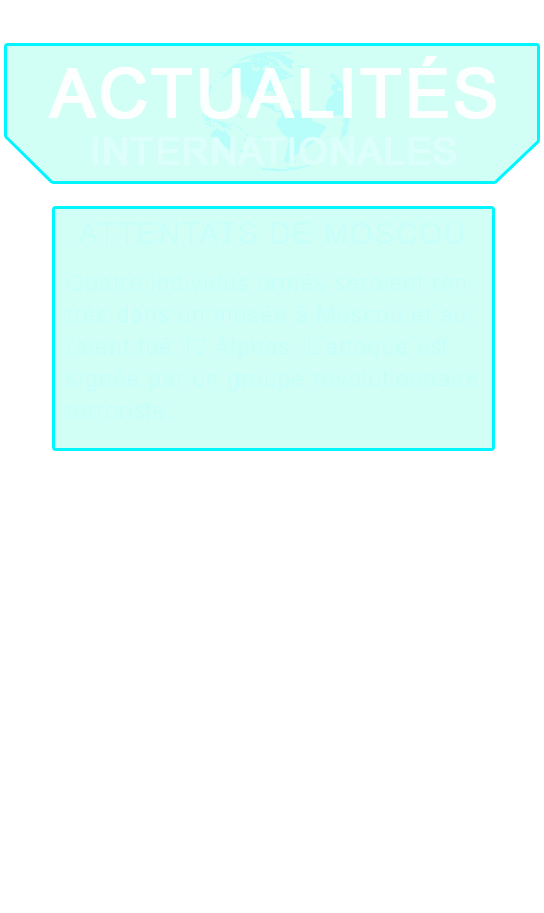
<style>
.page{position:relative;width:544px;height:913px;background:#ffffff}
.page>*{position:absolute;margin:0}
.t1{font:68px "ArialMT";letter-spacing:0.02em;color:#ffffff;font-weight:bold}
.t2{font:37px "ArialMT";letter-spacing:0.02em;color:#ddfffb;font-weight:bold}
.t3{font:30px "ArialMT";letter-spacing:0.02em;color:#c8fff9;font-weight:bold}
.t4{font:23px/32px "ArialMT";letter-spacing:0.02em;color:#c8fff9;font-weight:bold}
</style>
<div class="page">
<p class="t1" style="left:48px;top:56px;width:448px;height:63px;opacity:0.9">ACTUALITÉS</p>
<p class="t2" style="left:93px;top:137px;width:363px;height:28px">INTERNATIONALES</p>
<p class="t3" style="left:77px;top:222px;width:387px;height:23px">ATTENTATS DE MOSCOU</p>
<p class="t4" style="left:66px;top:274px;width:413px;height:146px">Quatre individus armés seraient rentrés dans un musée à Moscou et auraient tué 12 Alphas. L’attaque est signée par un groupe révolutionnaire terroriste.</p>
</div>
